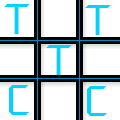
<style>
.page{position:relative;width:120px;height:120px;background:#ffffff}
.page>*{position:absolute;margin:0}
.t1{font:37.5px "Crystalclear";color:#01d2ff}
</style>
<div class="page">
<p class="t1" style="left:4px;top:4px;width:26px;height:30px">T</p>
<p class="t1" style="left:85px;top:5px;width:26px;height:30px">T</p>
<p class="t1" style="left:46px;top:45px;width:26px;height:30px">T</p>
<p class="t1" style="left:9px;top:85px;width:21px;height:30px">C</p>
<p class="t1" style="left:87px;top:86px;width:21px;height:30px">C</p>
</div>
